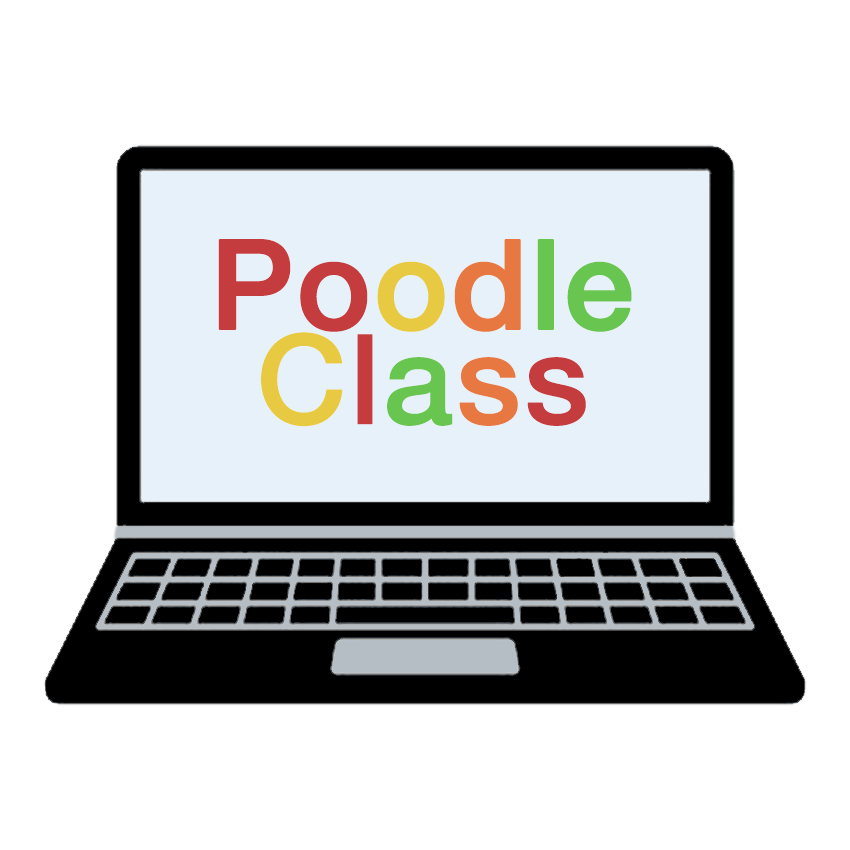
<style>
.page{position:relative;width:850px;height:850px;background:#ffffff}
.page>*{position:absolute;margin:0}
.t1{font:124.7px "HelveticaNeueLTStd-Md";color:#c53c3f;font-weight:bold}
.t2{font:124.7px "HelveticaNeueLTStd-Md";color:#e7ca41;font-weight:bold}
.t3{font:124.7px "HelveticaNeueLTStd-Md";color:#e77841;font-weight:bold}
.t4{font:124.7px "HelveticaNeueLTStd-Md";color:#68c54f;font-weight:bold}
</style>
<div class="page">
<p class="t1" style="left:218px;top:239px;width:414px;height:93px">Po<span class="t2">o</span><span class="t3">d</span><span class="t4">le</span></p>
<p class="t2" style="left:261px;top:332px;width:325px;height:95px">C<span class="t1">l</span><span class="t4">a</span><span class="t3">s</span><span class="t1">s</span></p>
</div>
